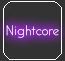
<style>
.page{position:relative;width:65px;height:61px;background:#333333}
.page>*{position:absolute;margin:0}
.t1{font:13.4px "CennerikPlain";color:#fffefe}
.t2{font:13.4px "Bryant-RegularAlt";color:#fffefe}
</style>
<div class="page">
<p class="t1" style="left:6px;top:25px;width:53px;height:13px">N<span class="t2">ig</span>h<span class="t2">t</span>core</p>
</div>
